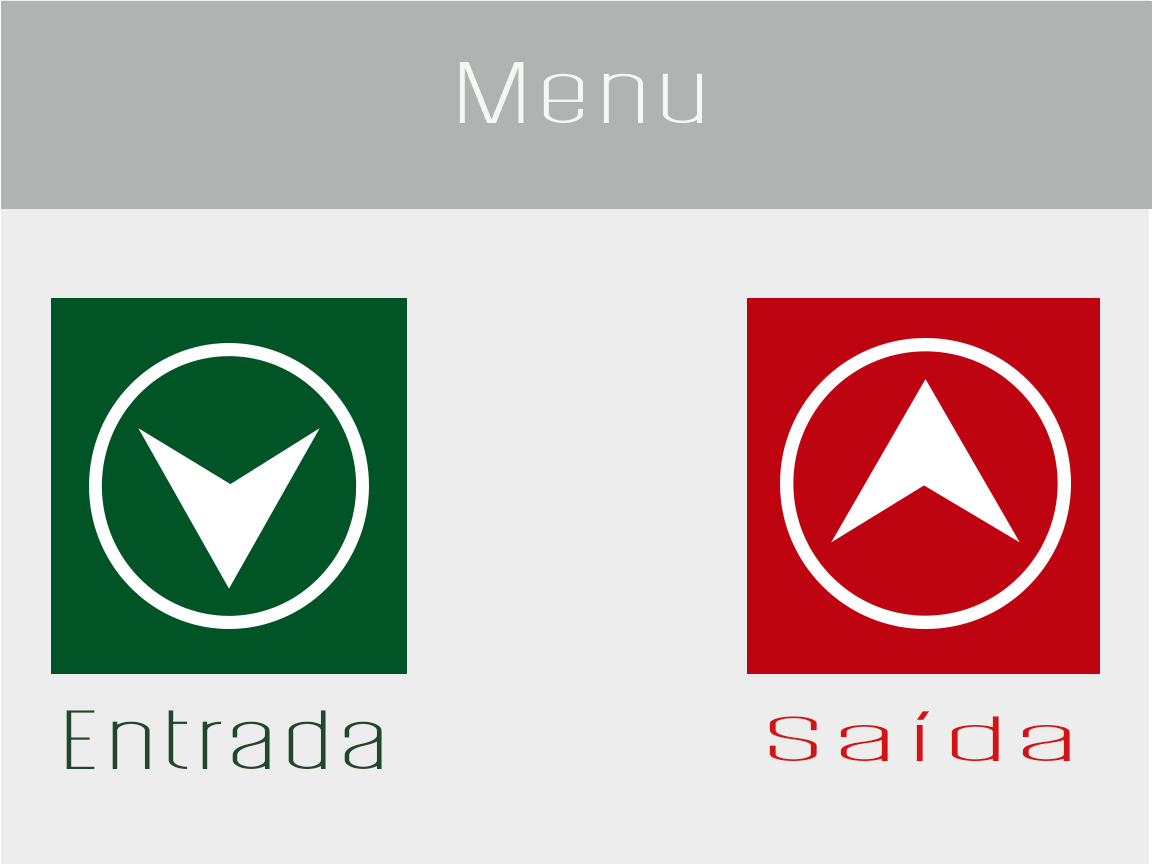
<style>
.page{position:relative;width:1152px;height:864px;background:#ededed}
.page>*{position:absolute;margin:0}
.t1{font:65.6px "PostScriptum-Light";color:#f3f8f4;scale:2.08 1}
.t2{font:63.1px "PostScriptum-Light";color:#1f4828;scale:2.05 1}
.t3{font:48px "PostScriptum-Light";color:#d41414;scale:3.42 1}
</style>
<div class="page">
<p class="t1" style="left:459px;top:62px;width:243px;height:61px">Menu</p>
<p class="t2" style="left:66px;top:710px;width:316px;height:59px">Entrada</p>
<p class="t3" style="left:769px;top:711px;width:301px;height:50px">Saída</p>
</div>
